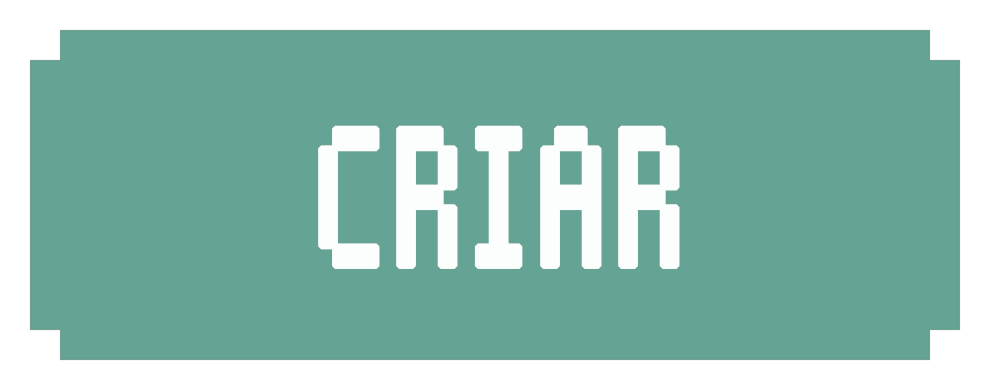
<style>
.page{position:relative;width:990px;height:390px;background:#65a394}
.page>*{position:absolute;margin:0}
.t1{font:255px "Pixelade";letter-spacing:0.025em;color:#fcfefe;font-weight:bold;scale:0.71 1}
</style>
<div class="page">
<p class="t1" style="left:318px;top:125px;width:362px;height:144px">CRIAR</p>
</div>
